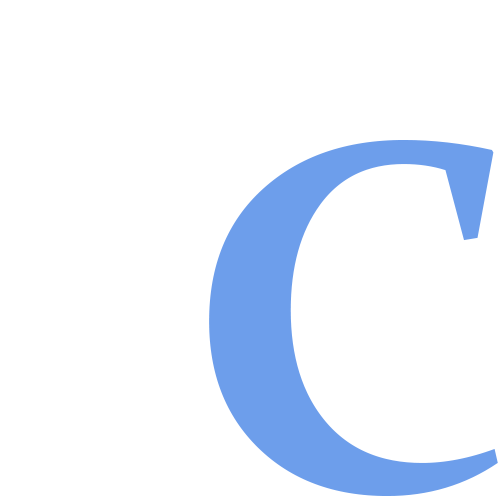
<style>
.page{position:relative;width:500px;height:500px;background:#ffffff}
.page>*{position:absolute;margin:0}
.t1{font:500px "Constantia-Bold";color:#6d9eeb}
</style>
<div class="page">
<p class="t1" style="left:209px;top:140px;width:289px;height:356px">C</p>
</div>
